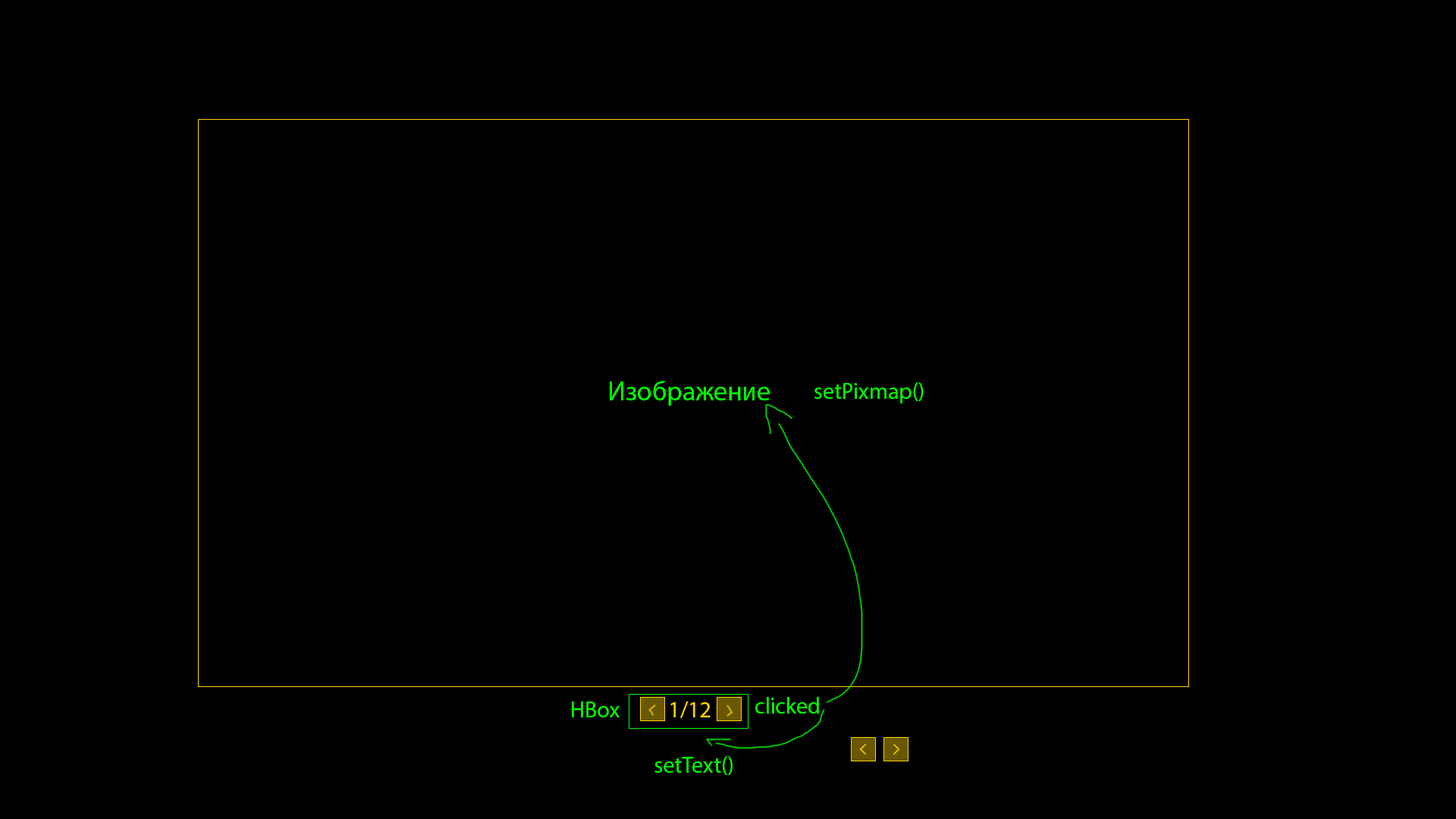
<style>
.page{position:relative;width:1456px;height:819px;background:#000000}
.page>*{position:absolute;margin:0}
.t1{font:27.3px "MyriadPro-Regular";color:#00ff00}
.t2{font:22.7px "MyriadPro-Regular";color:#00ff00}
.t3{font:22.7px "MyriadPro-Regular";color:#ffd300}
</style>
<div class="page">
<p class="t1" style="left:610px;top:381px;width:160px;height:25px">Изображение</p>
<p class="t2" style="left:814px;top:382px;width:110px;height:21px">setPixmap()</p>
<p class="t2" style="left:572px;top:701px;width:48px;height:16px">HBox</p>
<p class="t3" style="left:670px;top:701px;width:41px;height:17px">1/12</p>
<p class="t2" style="left:755px;top:697px;width:64px;height:17px">clicked</p>
<p class="t2" style="left:654px;top:756px;width:79px;height:19px">setText()</p>
</div>
